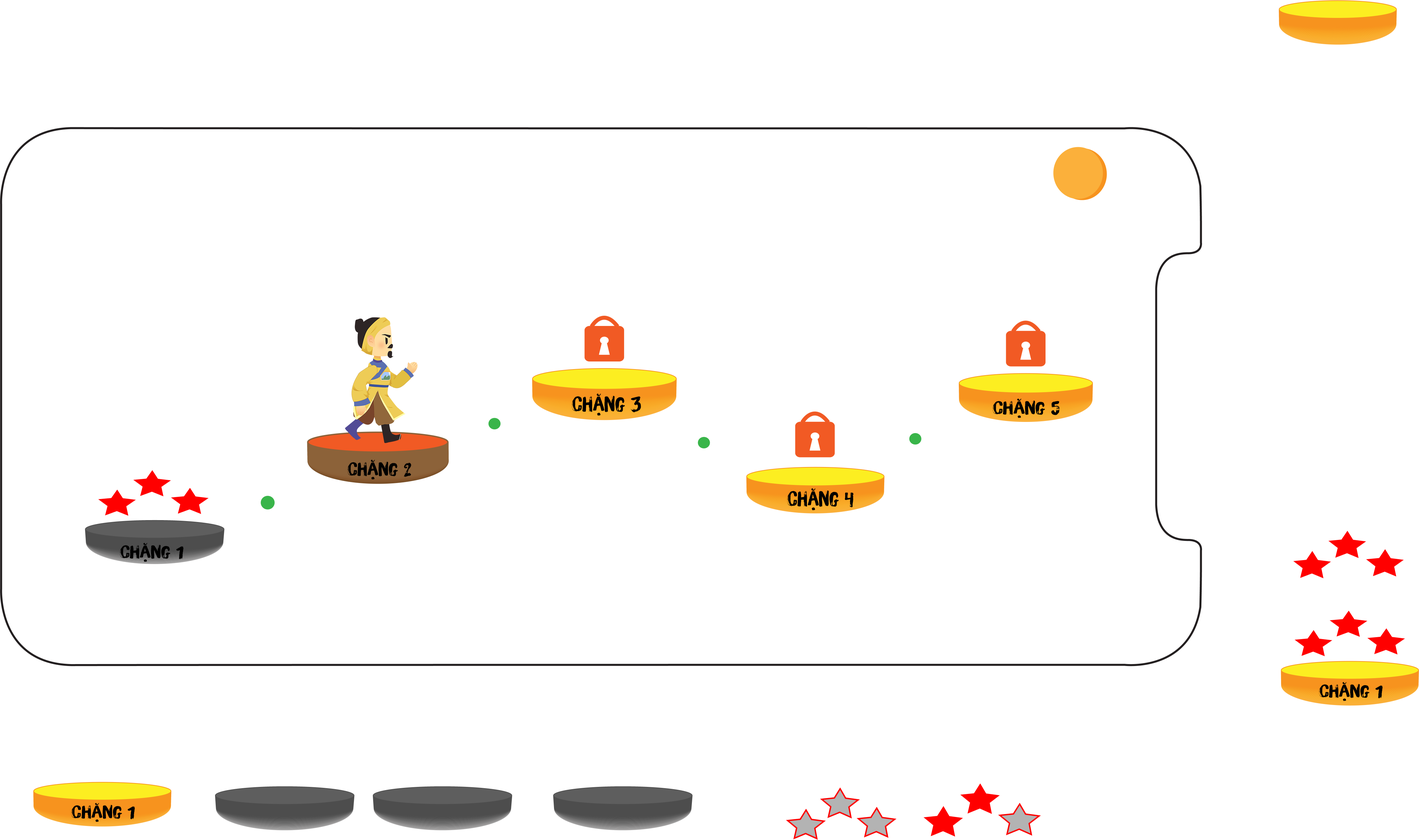
<style>
.page{position:relative;width:1419px;height:840px;background:#ffffff}
.page>*{position:absolute;margin:0}
.t1{font:20.3px "iCielBrushUp";color:#000000;scale:1.05 1}
.t2{font:17.9px "iCielBrushUp";color:#000000;scale:1.18 1}
.t3{font:18.2px "iCielBrushUp";color:#000000;scale:1.12 1}
.t4{font:20.3px "iCielBrushUp";color:#000000}
.t5{font:17.4px "iCielBrushUp";color:#000000;scale:1.17 1}
</style>
<div class="page">
<p class="t1" style="left:572px;top:394px;width:69px;height:22px">chặng 3</p>
<p class="t2" style="left:993px;top:399px;width:67px;height:19px">chặng 5</p>
<p class="t3" style="left:348px;top:460px;width:63px;height:20px">chặng 2</p>
<p class="t4" style="left:787px;top:488px;width:66px;height:22px">chặng 4</p>
<p class="t5" style="left:120px;top:543px;width:63px;height:19px">chặng 1</p>
<p class="t5" style="left:1319px;top:682px;width:63px;height:19px">chặng 1</p>
<p class="t5" style="left:71px;top:803px;width:64px;height:19px">chặng 1</p>
</div>
